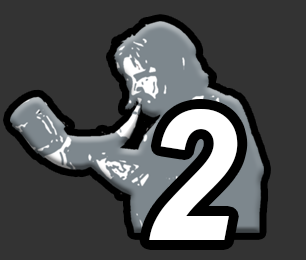
<style>
.page{position:relative;width:306px;height:260px;background:#333333}
.page>*{position:absolute;margin:0}
.t1{font:183.1px "Arial-BoldItalicMT";color:#ffffff;scale:0.94 1}
</style>
<div class="page">
<p class="t1" style="left:149px;top:109px;width:89px;height:131px">2</p>
</div>
